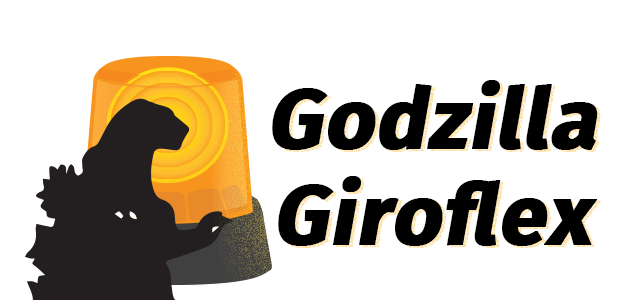
<style>
.page{position:relative;width:630px;height:300px;background:#ffffff}
.page>*{position:absolute;margin:0}
.t1{font:84px/48px "FiraSans-Bold";color:#000000;font-weight:bold;font-style:italic}
</style>
<div class="page">
<p class="t1" style="left:272px;top:80px;width:326px;height:166px;text-align:center">Godzilla<br><br>Giroflex</p>
</div>
